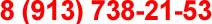
<style>
.page{position:relative;width:212px;height:24px;background:#ffffff}
.page>*{position:absolute;margin:0}
.t1{font:28px "Arial-BoldMT";letter-spacing:-0.025em;color:#ff0000;text-transform:uppercase}
</style>
<div class="page">
<p class="t1" style="left:0px;top:0px;width:212px;height:26px">8 (913) 738-21-53</p>
</div>
